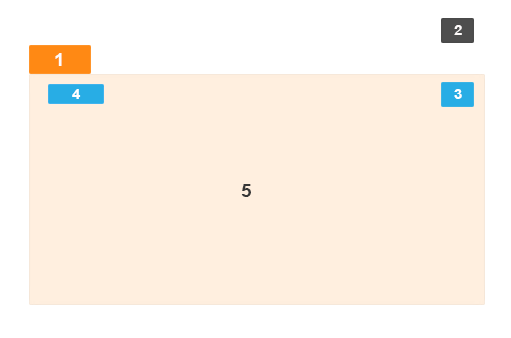
<style>
.page{position:relative;width:511px;height:338px;background:#ffefdf}
.page>*{position:absolute;margin:0}
.t1{font:14px "Arial-BoldMT";letter-spacing:-0.025em;color:#fdfafa;scale:1.06 1}
.t2{font:18px "Arial-BoldMT";letter-spacing:-0.025em;color:#fdfdfc;scale:1.06 1}
.t3{font:14px "Arial-BoldMT";letter-spacing:-0.025em;color:#ffffff;scale:1.06 1}
.t4{font:17.8px "Arial-BoldMT";letter-spacing:-0.025em;color:#373737;scale:1.06 1}
</style>
<div class="page">
<p class="t1" style="left:454px;top:25px;width:8px;height:10px">2</p>
<p class="t2" style="left:55px;top:53px;width:7px;height:13px">1</p>
<p class="t3" style="left:72px;top:89px;width:9px;height:10px">4</p>
<p class="t3" style="left:454px;top:89px;width:8px;height:10px">3</p>
<p class="t4" style="left:241px;top:184px;width:10px;height:13px">5</p>
</div>
